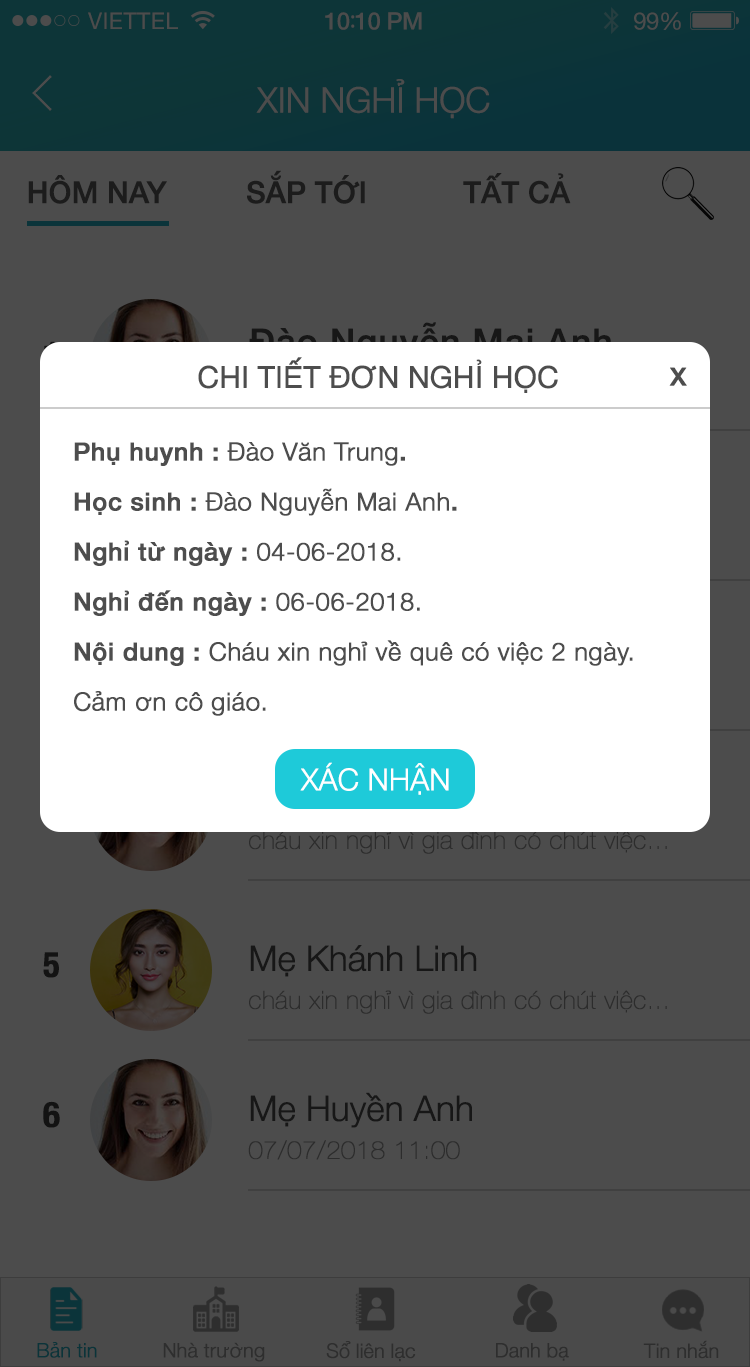
<style>
.page{position:relative;width:750px;height:1367px;background:#4c4c4c}
.page>*{position:absolute;margin:0}
.t1{font:23px "HelveticaNeue";letter-spacing:0.02em;color:#4c4c4c}
.t2{font:24px "HelveticaNeue-Medium";letter-spacing:-0.02em;color:#4c4c4c}
.t3{font:26px "MyriadPro-Regular";letter-spacing:-0.02em;color:#4c4c4c}
.t4{font:24px "HelveticaNeue";letter-spacing:-0.02em;color:#4c4c4c}
.t5{font:35px "HelveticaNeue-Light";letter-spacing:-0.02em;color:#4c4c4c;font-weight:bold}
.t6{font:30px "HelveticaNeue-Medium";letter-spacing:-0.02em;color:#1c1c1c;font-weight:bold}
.t7{font:30px "HelveticaNeue";letter-spacing:-0.02em;color:#4d4d4d;font-weight:bold}
.t8{font:25px "HelveticaNeue-Medium";letter-spacing:0.01em;color:#4d4d4d;font-weight:bold}
.t9{font:25px/50px "HelveticaNeue-Light";letter-spacing:0.01em;color:#4d4d4d;font-weight:bold}
.t10{font:25px/50px "HelveticaNeue-Medium";letter-spacing:0.01em;color:#4d4d4d;font-weight:bold}
.t11{font:30px "HelveticaNeue-Light";letter-spacing:-0.02em;color:#ffffff;font-weight:bold}
.t12{font:35px "HelveticaNeue-CondensedBold";letter-spacing:0.01em;color:#131313;font-weight:bold}
.t13{font:35px "HelveticaNeue-Light";letter-spacing:-0.02em;color:#171717;font-weight:bold}
.t14{font:25px "HelveticaNeue-UltraLight";letter-spacing:0.01em;color:#2c2c2c;font-weight:bold}
.t15{font:20px "HelveticaNeue-Light";letter-spacing:-0.02em;color:#0b343a;font-weight:bold}
.t16{font:20px "HelveticaNeue-Light";letter-spacing:-0.02em;color:#2e2e2e;font-weight:bold}
</style>
<div class="page">
<p class="t1" style="left:88px;top:12px;width:90px;height:17px">VIETTEL</p>
<p class="t2" style="left:325px;top:12px;width:97px;height:18px">10<span class="t3">:</span>10 PM</p>
<p class="t4" style="left:634px;top:12px;width:47px;height:18px">99%</p>
<p class="t5" style="left:256px;top:79px;width:234px;height:40px">XIN NGHỈ HỌC</p>
<p class="t6" style="left:247px;top:170px;width:118px;height:34px">SẮP TỚI</p>
<p class="t6" style="left:463px;top:173px;width:108px;height:31px">TẤT CẢ</p>
<p class="t6" style="left:28px;top:175px;width:139px;height:29px">HÔM NAY</p>
<p class="t7" style="left:198px;top:357px;width:360px;height:36px">CHI TIẾT ĐƠN NGHỈ HỌC</p>
<p class="t8" style="left:669px;top:367px;width:18px;height:19px">X</p>
<p class="t9" style="left:74px;top:442px;width:559px;height:274px"><span class="t10">Phụ huynh : </span>Đào Văn Trung<span class="t10">.<br>Học sinh : </span>Đào Nguyễn Mai Anh<span class="t10">.<br>Nghỉ từ ngày : </span>04-06-2018.<br><span class="t10">Nghỉ đến ngày : </span>06-06-2018.<br><span class="t10">Nội dung : </span>Cháu xin nghỉ về quê có việc 2 ngày.<br>Cảm ơn cô giáo.</p>
<p class="t11" style="left:300px;top:762px;width:149px;height:33px">XÁC NHẬN</p>
<p class="t12" style="left:43px;top:952px;width:16px;height:26px">5</p>
<p class="t13" style="left:250px;top:945px;width:227px;height:32px">Mẹ Khánh Linh</p>
<p class="t14" style="left:249px;top:990px;width:418px;height:24px">cháu xin nghỉ vì gia đình có chút việc...</p>
<p class="t13" style="left:250px;top:1092px;width:222px;height:36px">Mẹ Huyền Anh</p>
<p class="t12" style="left:43px;top:1101px;width:17px;height:27px">6</p>
<p class="t14" style="left:248px;top:1140px;width:212px;height:20px">07/07/2018 11:00</p>
<p class="t15" style="left:37px;top:1342px;width:60px;height:16px">Bản tin</p>
<p class="t16" style="left:163px;top:1342px;width:102px;height:20px">Nhà trường</p>
<p class="t16" style="left:326px;top:1341px;width:90px;height:21px">Sổ liên lạc</p>
<p class="t16" style="left:496px;top:1343px;width:73px;height:18px">Danh bạ</p>
<p class="t16" style="left:643px;top:1340px;width:76px;height:19px">Tin nhắn</p>
</div>
